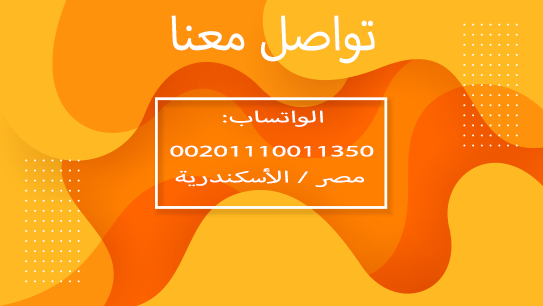
<style>
.page{position:relative;width:543px;height:306px;background:#ffba23}
.page>*{position:absolute;margin:0}
.t1{font:66.3px "MyriadArabic-Regular";color:#ffffff}
.t2{font:21.9px "MyriadArabic-Regular";color:#ffffff;scale:1.82 1}
</style>
<div class="page">
<p class="t1" style="left:171px;top:15px;width:204px;height:49px">تواصل معنا</p>
<p class="t2" style="left:222px;top:110px;width:101px;height:17px">الواتساب:</p>
<p class="t2" style="left:170px;top:145px;width:204px;height:12px">00201110011350</p>
<p class="t2" style="left:175px;top:168px;width:189px;height:19px">مصر / الأسكندرية</p>
</div>
